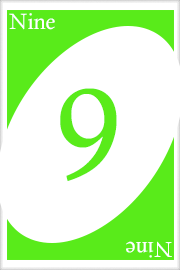
<style>
.page{position:relative;width:180px;height:270px;background:#ffffff}
.page>*{position:absolute;margin:0}
.t1{font:22px "CalistoMT";color:#ffffff}
.t2{font:128px "CalistoMT";color:#59eb1a}
.t3{font:21.7px "CalistoMT";color:#ffffff}
</style>
<div class="page">
<p class="t1" style="left:9px;top:13px;width:46px;height:17px">Nine</p>
<p class="t2" style="left:60px;top:88px;width:57px;height:93px">9</p>
<p class="t3" style="left:126px;top:241px;width:46px;height:17px;rotate:180deg">Nine</p>
</div>
